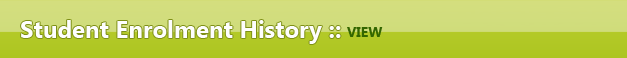
<style>
.page{position:relative;width:627px;height:58px}
.page>*{position:absolute;margin:0}
.t1{font:24px "SegoeUI-Bold";color:#fefefe}
.t2{font:14px "SegoeUI-Bold";color:#336600}
</style>
<div class="page">
<p class="t1" style="left:21px;top:20px;width:320px;height:24px">Student Enrolment History ::</p>
<p class="t2" style="left:347px;top:27px;width:36px;height:10px">VIEW</p>
</div>
